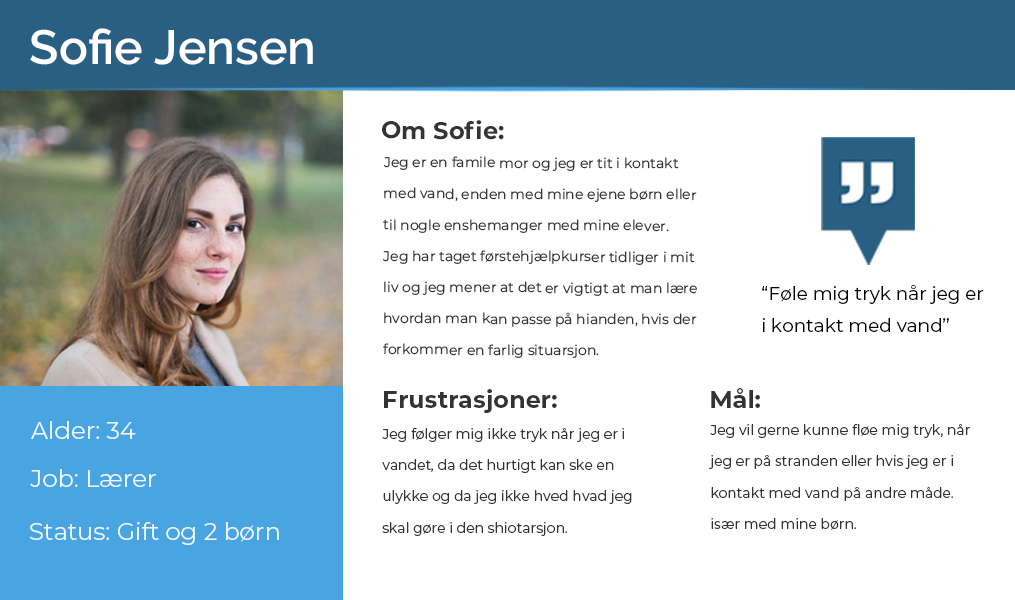
<style>
.page{position:relative;width:1015px;height:600px;background:#ffffff}
.page>*{position:absolute;margin:0}
.t1{font:48px "Raleway-SemiBold";color:#ffffff}
.t2{font:24px "Montserrat-Bold";color:#333333}
.t3{font:14px/31.2px "Montserrat-Regular";color:#333333}
.t4{font:18.5px/32.1px "Montserrat-Regular";color:#000000}
.t5{font:24px "Montserrat-Regular";color:#f1f9ff}
</style>
<div class="page">
<p class="t1" style="left:30px;top:28px;width:283px;height:37px">Sofie Jensen</p>
<p class="t2" style="left:382px;top:120px;width:122px;height:20px">Om Sofie:</p>
<p class="t3" style="left:382px;top:156px;width:315px;height:202px">Jeg er en famile mor og jeg er tit i kontakt med vand, enden med mine ejene børn eller til nogle enshemanger med mine elever.<br>Jeg har taget førstehjælpkurser tidliger i mit liv og jeg mener at det er vigtigt at man lære hvordan man kan passe på hianden, hvis der forkommer en farlig situarsjon.</p>
<p class="t4" style="left:762px;top:285px;width:222px;height:47px">“Føle mig tryk når jeg er i kontakt med vand”</p>
<p class="t2" style="left:384px;top:389px;width:173px;height:24px">Frustrasjoner:</p>
<p class="t2" style="left:711px;top:388px;width:49px;height:20px">Mål:</p>
<p class="t5" style="left:31px;top:421px;width:105px;height:18px">Alder: 34</p>
<p class="t3" style="left:709px;top:424px;width:261px;height:106px">Jeg vil gerne kunne fløe mig tryk, når jeg er på stranden eller hvis jeg er i kontakt med vand på andre måde.  især med mine børn.</p>
<p class="t3" style="left:382px;top:428px;width:250px;height:108px">Jeg følger mig ikke tryk når jeg er i vandet, da det hurtigt kan ske en ulykke og da jeg ikke hved hvad jeg skal gøre i den shiotarsjon.</p>
<p class="t5" style="left:30px;top:469px;width:126px;height:18px">Job: Lærer</p>
<p class="t5" style="left:29px;top:522px;width:250px;height:23px">Status: Gift og 2 børn</p>
</div>
